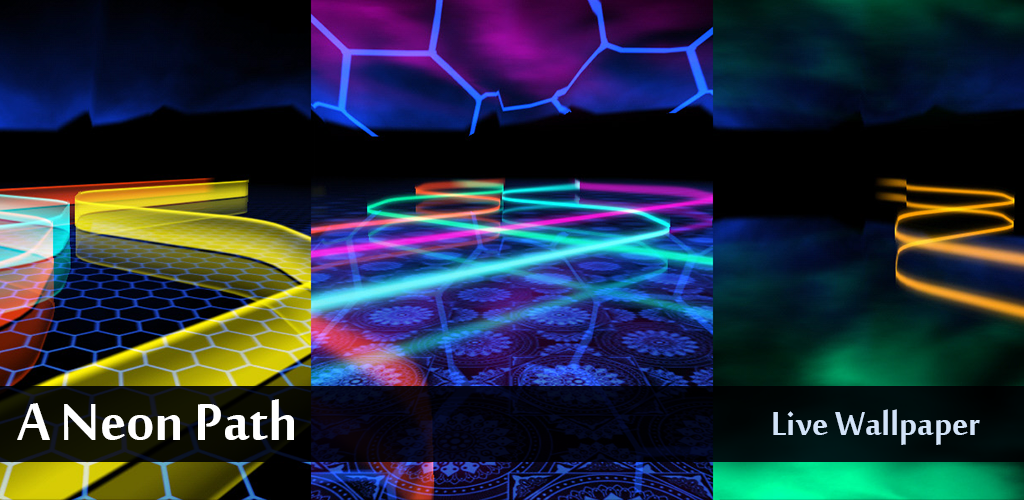
<style>
.page{position:relative;width:1024px;height:500px}
.page>*{position:absolute;margin:0}
.t1{font:80px "MoolBoran";color:#ffffff}
.t2{font:50px "MoolBoran";color:#d2e3f8}
</style>
<div class="page">
<p class="t1" style="left:17px;top:399px;width:277px;height:41px">A Neon Path</p>
<p class="t2" style="left:773px;top:409px;width:207px;height:36px">Live Wallpaper</p>
</div>
